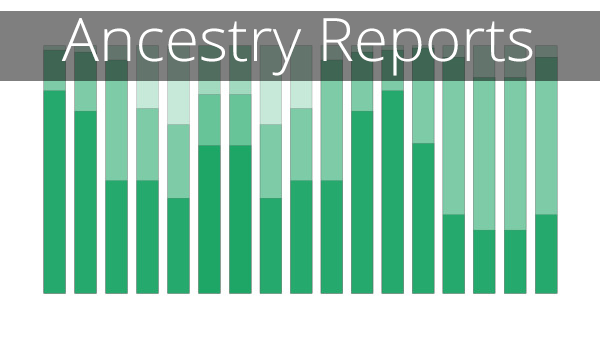
<style>
.page{position:relative;width:600px;height:339px;background:#ffffff}
.page>*{position:absolute;margin:0}
.t1{font:60px "OpenSans-Light";color:#ffffff;scale:1.03 1}
</style>
<div class="page">
<p class="t1" style="left:61px;top:18px;width:472px;height:58px">Ancestry Reports</p>
</div>
